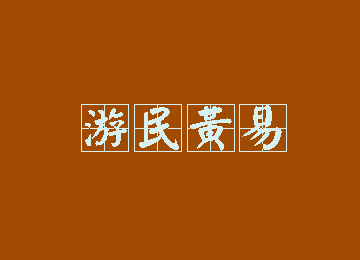
<style>
.page{position:relative;width:360px;height:260px;background:#a14a02}
.page>*{position:absolute;margin:0}
.t1{font:48px "YankaigungEG-Ultra-GB";letter-spacing:0.1em;color:#d7f1f0}
</style>
<div class="page">
<p class="t1" style="left:81px;top:104px;width:206px;height:48px">游民黄易</p>
</div>
